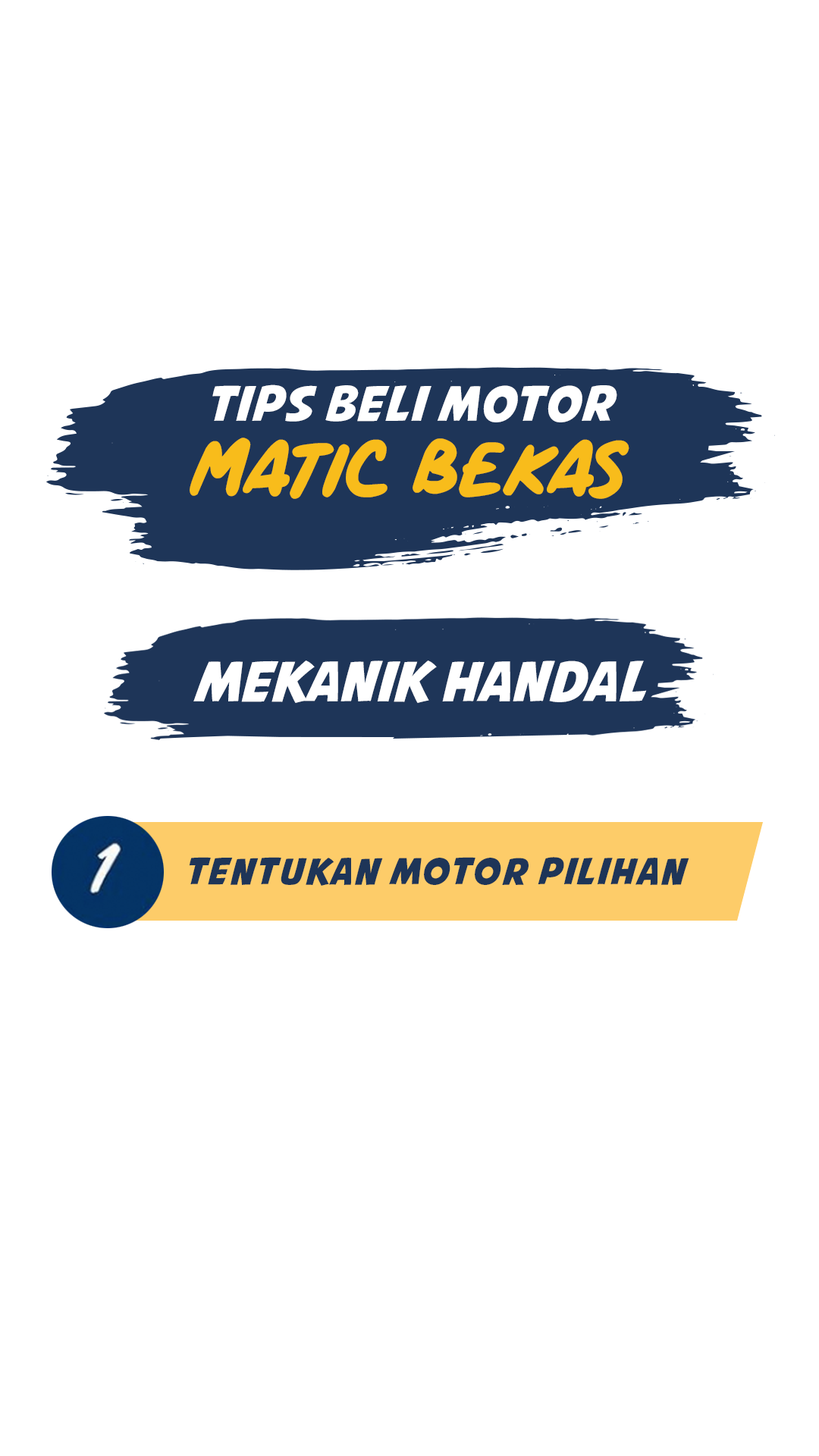
<style>
.page{position:relative;width:819px;height:1456px;background:#ffffff}
.page>*{position:absolute;margin:0}
.t1{font:48.3px "AvengeanceMightiestAvenger";letter-spacing:0.025em;color:#ffffff}
.t2{font:66.2px "ComicPanels";color:#f8bc1b}
.t3{font:55.3px "AvengeanceMightiestAvenger";color:#ffffff}
.t4{font:36.4px "AvengeanceMightiestAvenger";letter-spacing:0.05em;color:#1e3558}
</style>
<div class="page">
<p class="t1" style="left:212px;top:384px;width:405px;height:38px">TIPS BELI MOTOR</p>
<p class="t2" style="left:190px;top:438px;width:439px;height:61px">MATIC BEKAS</p>
<p class="t3" style="left:193px;top:660px;width:454px;height:43px">MEKANIK HANDAL</p>
<p class="t4" style="left:189px;top:857px;width:500px;height:29px">Tentukan motor pilihan</p>
</div>
